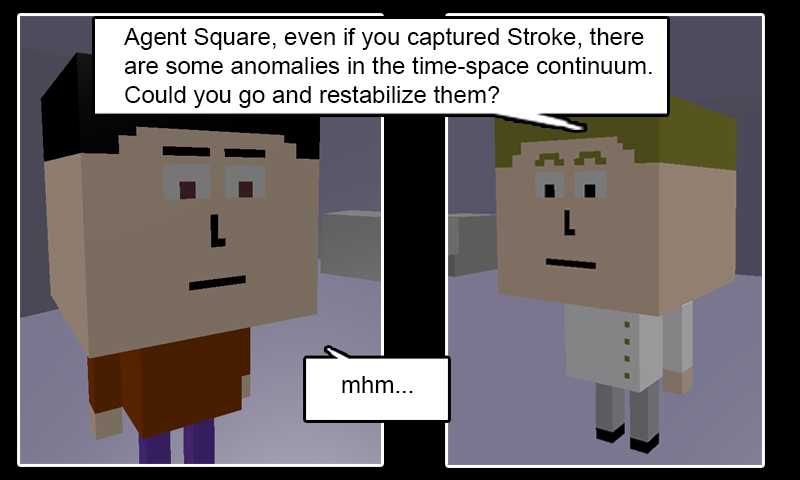
<style>
.page{position:relative;width:800px;height:480px;background:#000000}
.page>*{position:absolute;margin:0}
.t1{font:24px "ArialMT";color:#000000}
</style>
<div class="page">
<p class="t1" style="left:124px;top:27px;width:528px;height:81px">Agent Square, even if you captured Stroke, there<br>are some anomalies in the time-space continuum.<br>Could you go and restabilize them?</p>
<p class="t1" style="left:342px;top:376px;width:71px;height:17px">mhm...</p>
</div>
